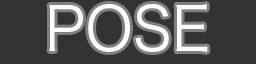
<style>
.page{position:relative;width:256px;height:64px;background:#333333}
.page>*{position:absolute;margin:0}
.t1{font:60px "HiraKakuProN-W3";color:#fffbfb}
</style>
<div class="page">
<p class="t1" style="left:49px;top:4px;width:159px;height:48px">POSE</p>
</div>
